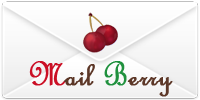
<style>
.page{position:relative;width:200px;height:100px}
.page>*{position:absolute;margin:0}
.t1{font:36px "FrenchScriptMT";color:#5d3828;font-weight:bold}
.t2{font:36px "FrenchScriptMT";color:#cb0f25;font-weight:bold}
.t3{font:36px "FrenchScriptMT";color:#5c3727;font-weight:bold}
.t4{font:36px "FrenchScriptMT";color:#20913e;font-weight:bold}
</style>
<div class="page">
<p class="t1" style="left:29px;top:61px;width:144px;height:36px"><span class="t2">M</span><span class="t3">ail </span><span class="t4">B</span>erry</p>
</div>
